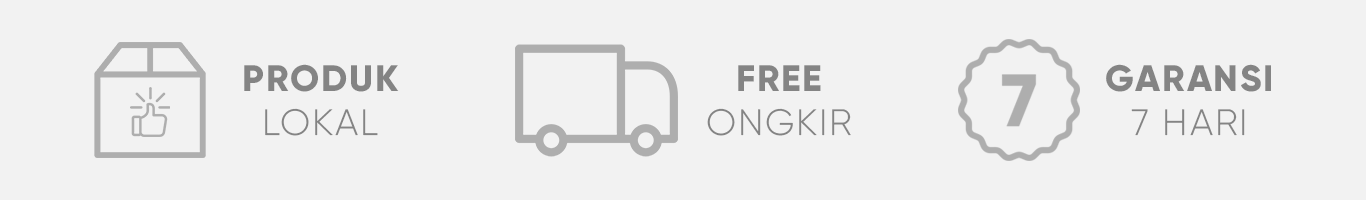
<style>
.page{position:relative;width:1366px;height:200px;background:#f2f2f2}
.page>*{position:absolute;margin:0}
.t1{font:36.7px "Gilroy-ExtraBold";letter-spacing:0.05em;color:#848484}
.t2{font:36.7px "Gilroy-Light";letter-spacing:0.05em;color:#848484}
</style>
<div class="page">
<p class="t1" style="left:244px;top:64px;width:155px;height:72px;text-align:center">PRODUK<br><span class="t2">LOKAL</span></p>
<p class="t2" style="left:707px;top:65px;width:144px;height:71px;text-align:center"><span class="t1">FREE<br></span>ONGKIR</p>
<p class="t1" style="left:1106px;top:64px;width:165px;height:72px;text-align:center">GARANSI<br><span class="t2">7 HARI</span></p>
</div>
